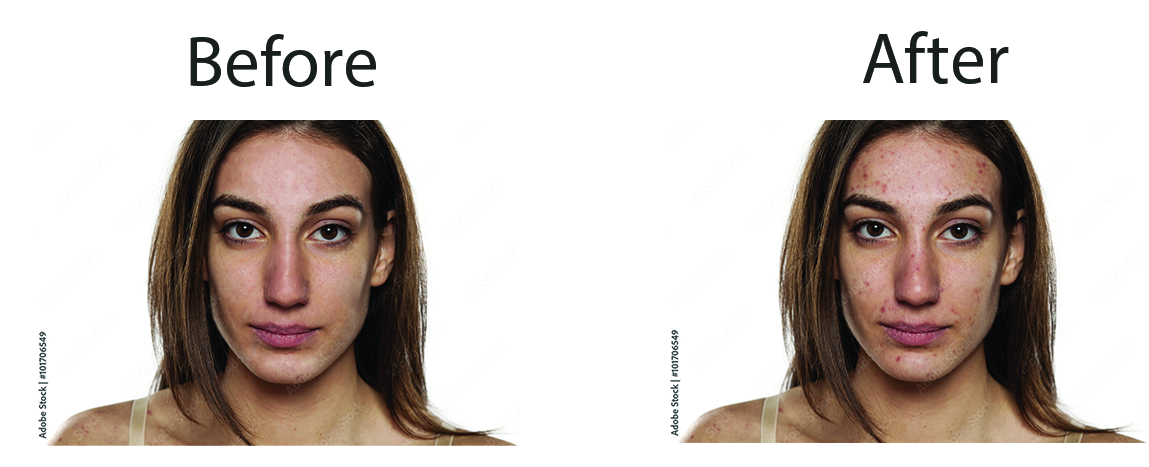
<style>
.page{position:relative;width:1149px;height:467px;background:#ffffff}
.page>*{position:absolute;margin:0}
.t1{font:72px "MyriadPro-Regular";color:#181d1e}
</style>
<div class="page">
<p class="t1" style="left:190px;top:34px;width:186px;height:53px">Before</p>
<p class="t1" style="left:863px;top:31px;width:146px;height:53px">After</p>
</div>
